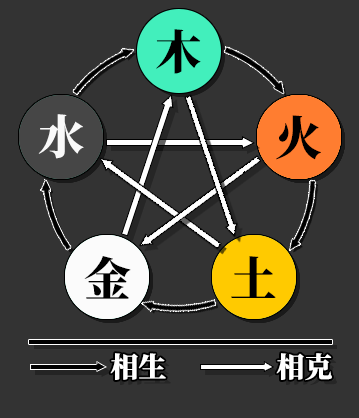
<style>
.page{position:relative;width:359px;height:418px;background:#333333}
.page>*{position:absolute;margin:0}
.t1{font:46.7px "SourceHanSerifSC-Heavy";color:#000000}
.t2{font:46.7px "SourceHanSerifSC-Heavy";color:#f9f9f9}
.t3{font:28px "SourceHanSerifSC-Heavy";color:#ffffff}
</style>
<div class="page">
<p class="t1" style="left:156px;top:29px;width:45px;height:45px">木</p>
<p class="t2" style="left:38px;top:114px;width:46px;height:45px">水</p>
<p class="t1" style="left:276px;top:115px;width:45px;height:45px">火</p>
<p class="t1" style="left:84px;top:256px;width:47px;height:43px">金</p>
<p class="t1" style="left:231px;top:256px;width:45px;height:42px">土</p>
<p class="t3" style="left:110px;top:353px;width:56px;height:27px">相生</p>
<p class="t3" style="left:276px;top:353px;width:56px;height:28px">相克</p>
</div>
